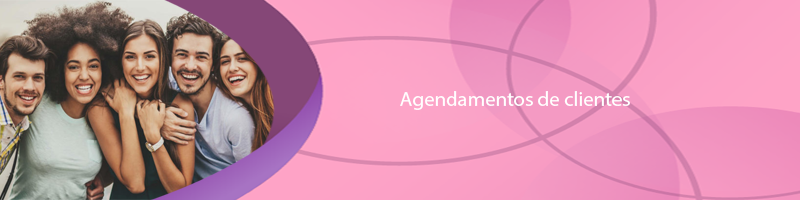
<style>
.page{position:relative;width:800px;height:200px}
.page>*{position:absolute;margin:0}
.t1{font:20.8px "MyriadPro-Regular";color:#ffffff}
</style>
<div class="page">
<p class="t1" style="left:400px;top:91px;width:230px;height:19px">Agendamentos de clientes</p>
</div>
